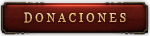
<style>
.page{position:relative;width:150px;height:36px}
.page>*{position:absolute;margin:0}
.t1{font:11.5px "Georgia";letter-spacing:0.25em;text-transform:uppercase}
</style>
<div class="page">
<p class="t1" style="left:24px;top:13px;width:102px;height:11px">DONACIONES</p>
<p class="t1" style="left:24px;top:12px;width:102px;height:11px">DONACIONES</p>
<p class="t1" style="left:24px;top:12px;width:102px;height:11px">DONACIONES</p>
<p class="t1" style="left:24px;top:12px;width:102px;height:11px">DONACIONES</p>
</div>
